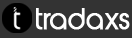
<style>
.page{position:relative;width:132px;height:38px;background:#333333}
.page>*{position:absolute;margin:0}
.t1{font:26.7px "AbeatbyKai";color:#ffffff;font-weight:bold}
</style>
<div class="page">
<p class="t1" style="left:36px;top:8px;width:94px;height:22px">tradaxs</p>
</div>
